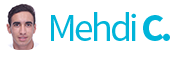
<style>
.page{position:relative;width:170px;height:57px;background:#ffffff}
.page>*{position:absolute;margin:0}
.t1{font:39.6px "SourceSansPro-Regular";letter-spacing:-0.07em;color:#00b4d9}
.t2{font:39.6px "SourceSansPro-Bold";letter-spacing:-0.07em;color:#00b4d9}
</style>
<div class="page">
<p class="t1" style="left:51px;top:12px;width:119px;height:29px">Mehdi <span class="t2">C.</span></p>
</div>
